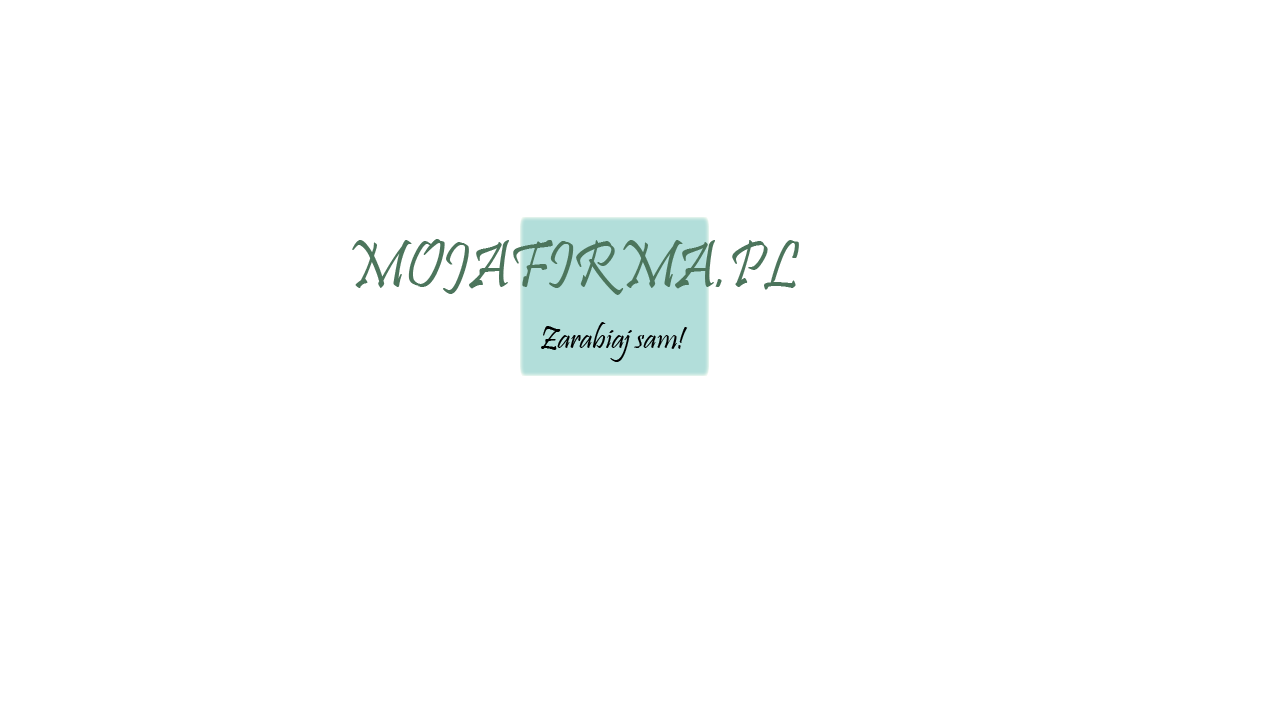
<style>
.page{position:relative;width:1278px;height:719px;background:#ffffff}
.page>*{position:absolute;margin:0}
.t1{font:68.5px "Pristina-Regular";color:#4c755c;scale:0.92 1}
.t2{font:32px "Pristina-Regular";color:#000000}
</style>
<div class="page">
<p class="t1" style="left:352px;top:239px;width:447px;height:56px">MOJAFIRMA.PL</p>
<p class="t2" style="left:541px;top:322px;width:147px;height:40px">Zarabiaj sam!</p>
</div>
